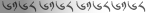
<style>
.page{position:relative;width:150px;height:13px}
.page>*{position:absolute;margin:0}
.t1{font:18px "Kailasa";color:#2e2e2e}
.t2{font:18px "Kailasa";color:#535353}
</style>
<div class="page">
<p class="t1" style="left:2px;top:1px;width:35px;height:11px">༦༡༦༨</p>
<p class="t2" style="left:39px;top:1px;width:35px;height:11px">༦༡༦༨</p>
<p class="t2" style="left:76px;top:1px;width:35px;height:11px">༦༡༦༨</p>
<p class="t2" style="left:111px;top:1px;width:35px;height:11px">༦༡༦༨</p>
</div>
